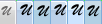
<style>
.page{position:relative;width:102px;height:24px}
.page>*{position:absolute;margin:0}
.t1{font:13.9px "STXingkai";color:#6c6a6a}
.t2{font:16.7px "STXingkai";color:#000000}
</style>
<div class="page">
<p class="t1" style="left:1px;top:6px;width:11px;height:10px">U</p>
<p class="t2" style="left:20px;top:4px;width:13px;height:12px">U</p>
<p class="t2" style="left:37px;top:5px;width:13px;height:12px">U</p>
<p class="t2" style="left:54px;top:4px;width:13px;height:12px">U</p>
<p class="t2" style="left:71px;top:4px;width:13px;height:12px">U</p>
<p class="t2" style="left:87px;top:5px;width:13px;height:12px">U</p>
</div>
